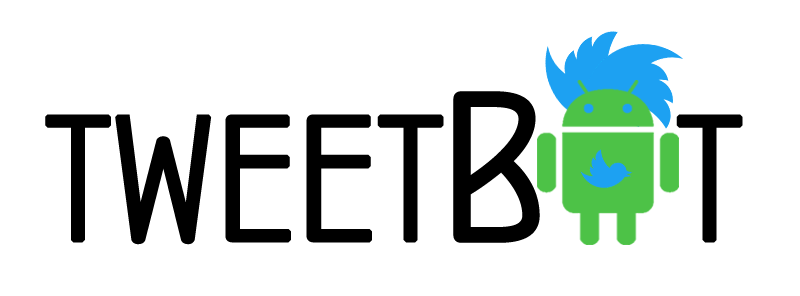
<style>
.page{position:relative;width:800px;height:296px;background:#ffffff}
.page>*{position:absolute;margin:0}
.t1{font:175.7px "ConcursoItalianBTNWide";color:#000000;text-transform:uppercase;font-weight:bold}
.t2{font:208.1px "ConcursoItalianBTNWide";color:#000000;text-transform:uppercase;font-weight:bold}
</style>
<div class="page">
<p class="t1" style="left:45px;top:91px;width:698px;height:154px">tweeT<span class="t2">B   </span>T</p>
</div>
